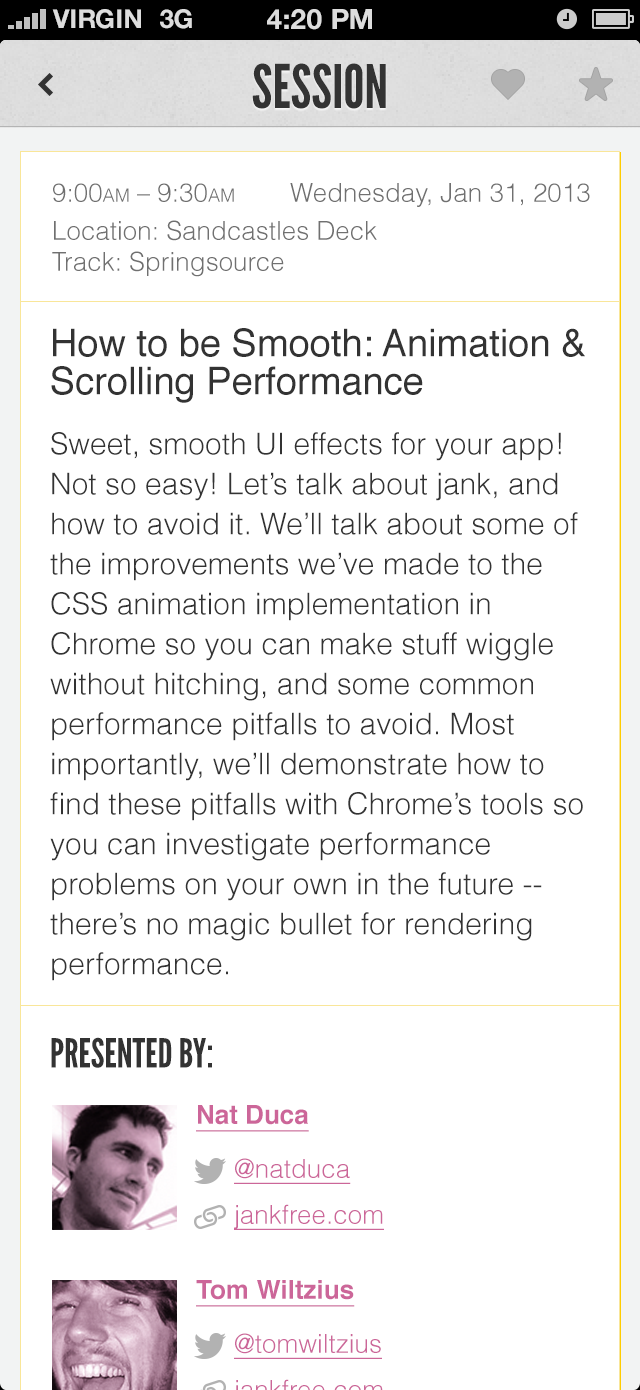
<style>
.page{position:relative;width:640px;height:1390px;background:#ffffff}
.page>*{position:absolute;margin:0}
.t1{font:26px "HelveticaNeue-Bold";color:#dddddd;text-transform:uppercase}
.t2{font:28px "HelveticaNeue-Bold";color:#dddddd;text-transform:uppercase}
.t3{font:60px "LeagueGothic-Regular";color:#333333;text-transform:uppercase}
.t4{font:26px "Helvetica-Light";color:#707070;font-variant:small-caps}
.t5{font:26px "Helvetica-Light";color:#707070}
.t6{font:30px/40px "Helvetica-Light";color:#333333}
.t7{font:38px/38px "Helvetica";color:#333333}
.t8{font:40px "LeagueGothic-Regular";color:#333333;text-transform:uppercase}
.t9{font:26px "Helvetica-Bold";color:#cc6699;text-decoration:underline}
.t10{font:26px "Helvetica-Light";color:#cc6699;text-decoration:underline}
</style>
<div class="page">
<p class="t1" style="left:52px;top:9px;width:89px;height:20px">VIRGIN</p>
<p class="t1" style="left:160px;top:9px;width:32px;height:20px">3G</p>
<p class="t2" style="left:267px;top:9px;width:105px;height:21px">4:20 pM</p>
<p class="t3" style="left:252px;top:63px;width:134px;height:46px">Session</p>
<p class="t4" style="left:53px;top:183px;width:181px;height:19px">9:00am – 9:30am</p>
<p class="t5" style="left:290px;top:183px;width:300px;height:24px">Wednesday, Jan 31, 2013</p>
<p class="t5" style="left:54px;top:220px;width:323px;height:21px">Location: Sandcastles Deck</p>
<p class="t5" style="left:52px;top:251px;width:232px;height:26px">Track: Springsource</p>
<p class="t6" style="left:50px;top:328px;width:535px;height:653px"><span class="t7">How to be Smooth: Animation &amp; Scrolling Performance<br></span>Sweet, smooth UI effects for your app! Not so easy! Let’s talk about jank, and how to avoid it. We’ll talk about some of the improvements we’ve made to the CSS animation implementation in Chrome so you can make stuff wiggle without hitching, and some common performance pitfalls to avoid. Most importantly, we’ll demonstrate how to find these pitfalls with Chrome’s tools so you can investigate performance problems on your own in the future -- there’s no magic bullet for rendering performance.</p>
<p class="t8" style="left:51px;top:1037px;width:161px;height:31px">Presented by:</p>
<p class="t9" style="left:196px;top:1105px;width:113px;height:27px">Nat Duca</p>
<p class="t10" style="left:234px;top:1158px;width:117px;height:26px">@natduca</p>
<p class="t10" style="left:234px;top:1204px;width:150px;height:26px">jankfree.com</p>
<p class="t9" style="left:196px;top:1280px;width:159px;height:27px">Tom Wiltzius</p>
<p class="t10" style="left:234px;top:1333px;width:148px;height:26px">@tomwiltzius</p>
</div>
